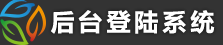
<style>
.page{position:relative;width:223px;height:45px;background:#333333}
.page>*{position:absolute;margin:0}
.t1{font:24px "MicrosoftYaHei-Bold";letter-spacing:0.2em;color:#ffffff}
</style>
<div class="page">
<p class="t1" style="left:51px;top:10px;width:164px;height:24px">后台登陆系统</p>
</div>
